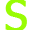
<style>
.page{position:relative;width:30px;height:30px;background:#ffffff}
.page>*{position:absolute;margin:0}
.t1{font:41.3px "Tahoma";color:#99fc04;text-transform:uppercase;font-weight:bold}
</style>
<div class="page">
<p class="t1" style="left:5px;top:0px;width:22px;height:32px">S</p>
</div>
